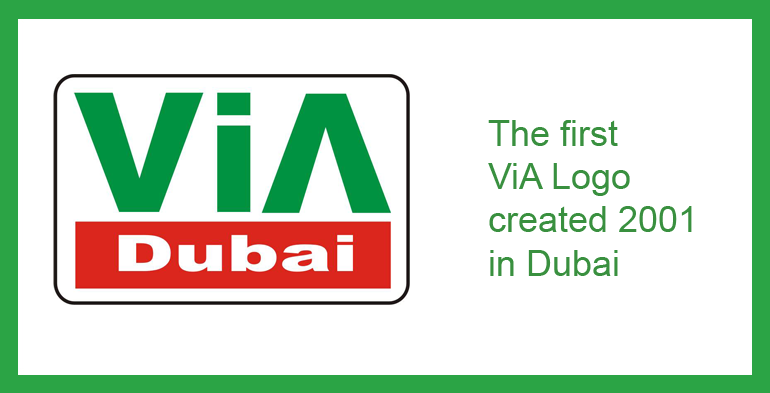
<style>
.page{position:relative;width:770px;height:393px;background:#ffffff}
.page>*{position:absolute;margin:0}
.t1{font:36px "ArialMT";color:#39903f}
</style>
<div class="page">
<p class="t1" style="left:488px;top:120px;width:204px;height:156px">The first<br>ViA Logo<br>created 2001<br>in Dubai</p>
</div>
